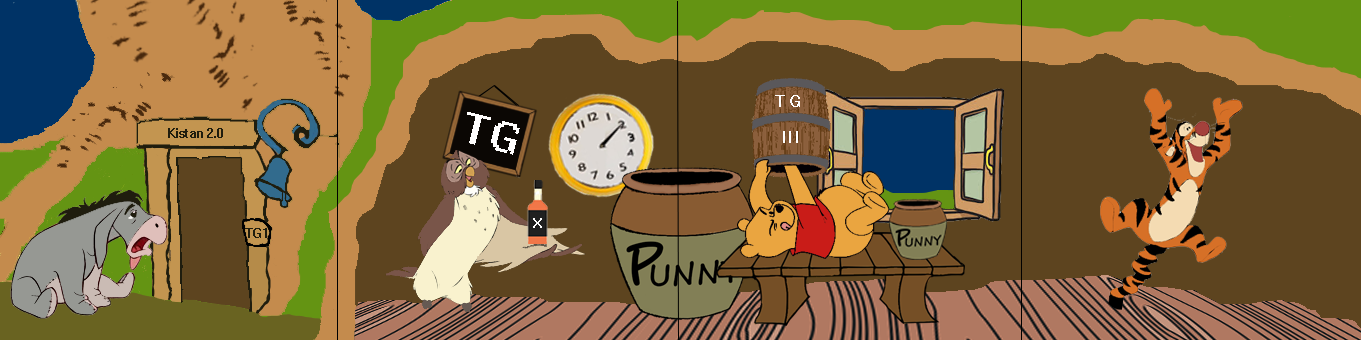
<style>
.page{position:relative;width:1361px;height:340px;background:#5d441f}
.page>*{position:absolute;margin:0}
.t1{font:20.6px "System";color:#fffefe}
.t2{font:42px "System";color:#fffefe}
.t3{font:11.7px "System";color:#1f1d0e}
.t4{font:14.7px "System";color:#ffffff}
</style>
<div class="page">
<p class="t1" style="left:775px;top:95px;width:25px;height:12px">TG</p>
<p class="t2" style="left:467px;top:112px;width:53px;height:43px;rotate:14deg">TG</p>
<p class="t3" style="left:168px;top:128px;width:55px;height:10px">Kistan 2.0</p>
<p class="t1" style="left:783px;top:131px;width:15px;height:12px">III</p>
<p class="t4" style="left:533px;top:218px;width:9px;height:10px">X</p>
<p class="t3" style="left:245px;top:228px;width:22px;height:10px">TG1</p>
</div>
